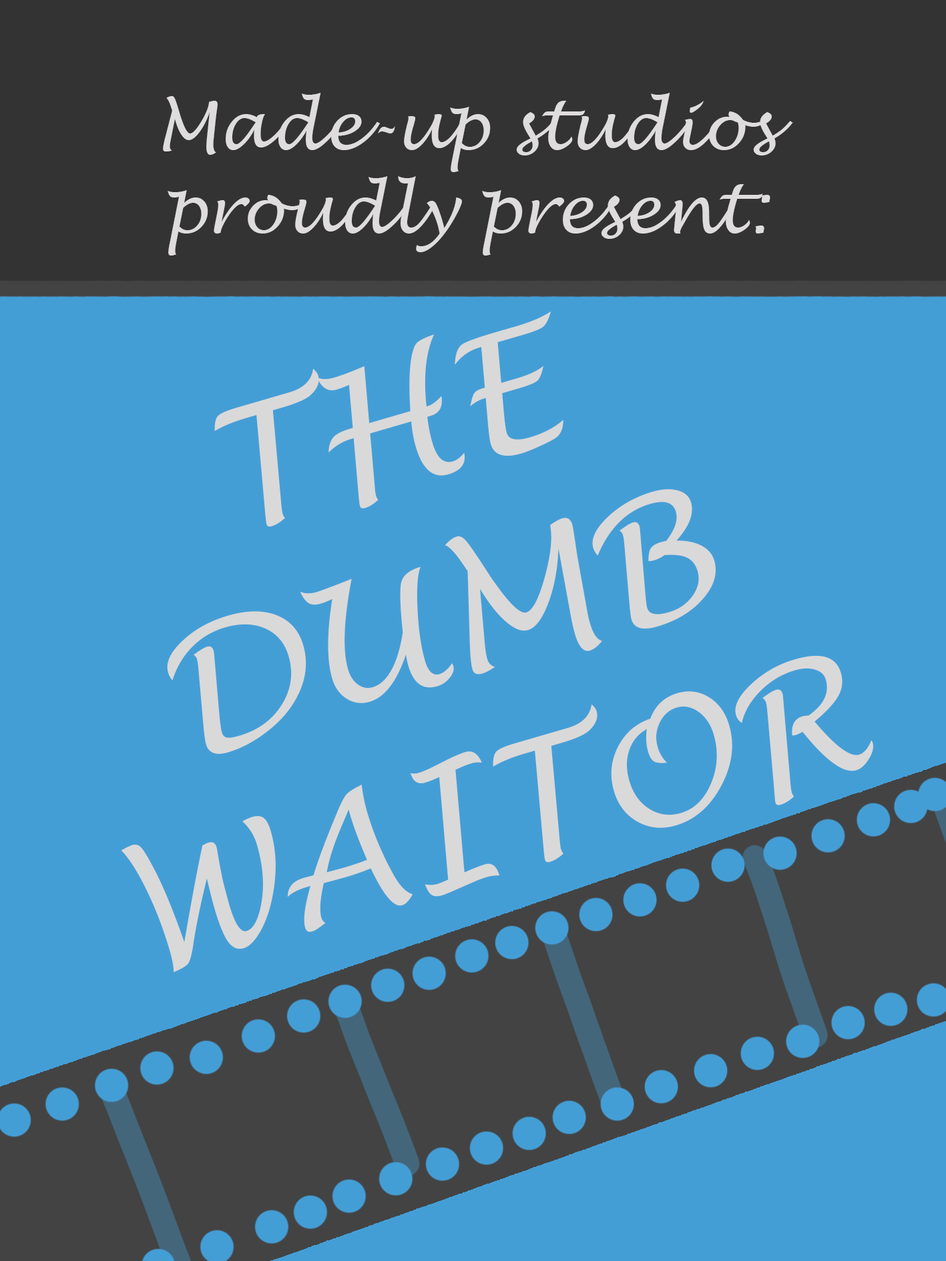
<style>
.page{position:relative;width:946px;height:1261px;background:#449ed6}
.page>*{position:absolute;margin:0}
.t1{font:66.7px/83.4px "LucidaHandwriting-Italic";color:#dedcdd}
.t2{font:166.8px "LucidaHandwriting-Italic";color:#d9d9d9}
</style>
<div class="page">
<p class="t1" style="left:163px;top:93px;width:630px;height:163px;text-align:center">Made-up studios proudly present:</p>
<p class="t2" style="left:121px;top:311px;width:752px;height:662px;rotate:-16deg">THE DUMB WAITOR</p>
</div>
